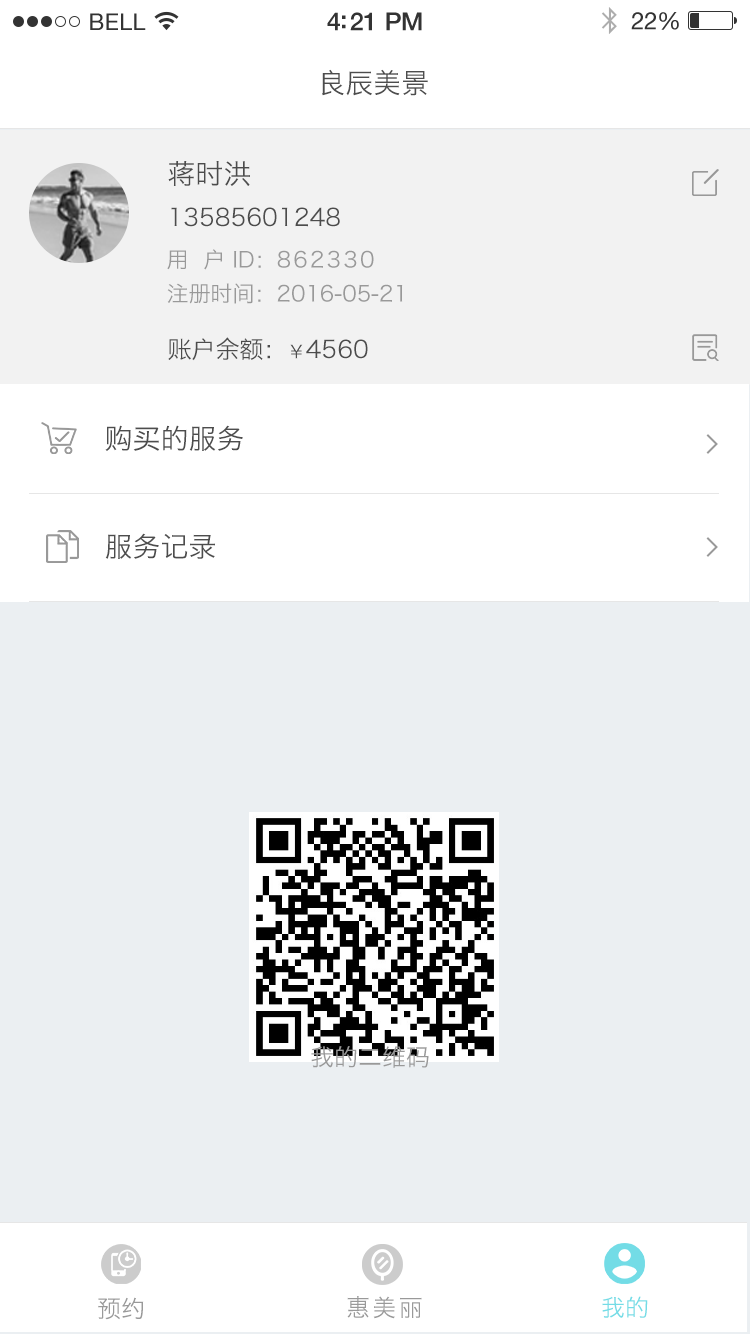
<style>
.page{position:relative;width:750px;height:1334px;background:#ebeff2}
.page>*{position:absolute;margin:0}
.t1{font:28px "HiraginoSansGB-W3";color:#4d4d4d}
.t2{font:24px/42px "HiraginoSansGB-W3";color:#4c4c4c}
.t3{font:28px/42px "HiraginoSansGB-W3";color:#4c4c4c}
.t4{font:22px/34px "HiraginoSansGB-W3";color:#999999}
.t5{font:22px "HiraginoSansGB-W3";letter-spacing:0.1em;color:#999999}
.t6{font:24px "HiraginoSansGB-W3";color:#4c4c4c}
.t7{font:18px "HiraginoSansGB-W3";color:#4c4c4c}
.t8{font:24px "HiraginoSansGB-W3";color:#999999}
.t9{font:24px "HiraginoSansGB-W3";letter-spacing:0.1em;color:#999999}
.t10{font:24px "HiraginoSansGB-W3";color:#73dce6}
</style>
<div class="page">
<p class="t1" style="left:322px;top:69px;width:106px;height:27px">良辰美景</p>
<p class="t2" style="left:168px;top:161px;width:172px;height:66px;text-align:justify"><span class="t3">蒋时洪                                <br></span>13585601248</p>
<p class="t4" style="left:167px;top:249px;width:236px;height:55px;text-align:justify">用  户 ID：<span class="t5">862330<br></span>注册时间：2016-05-21</p>
<p class="t6" style="left:168px;top:337px;width:200px;height:24px">账户余额：<span class="t7">￥</span>4560</p>
<p class="t1" style="left:105px;top:425px;width:138px;height:26px">购买的服务</p>
<p class="t1" style="left:105px;top:533px;width:110px;height:26px">服务记录</p>
<p class="t8" style="left:98px;top:1297px;width:46px;height:23px">预约</p>
<p class="t9" style="left:347px;top:1296px;width:75px;height:23px">惠美丽</p>
<p class="t10" style="left:602px;top:1296px;width:46px;height:22px">我的</p>
</div>
